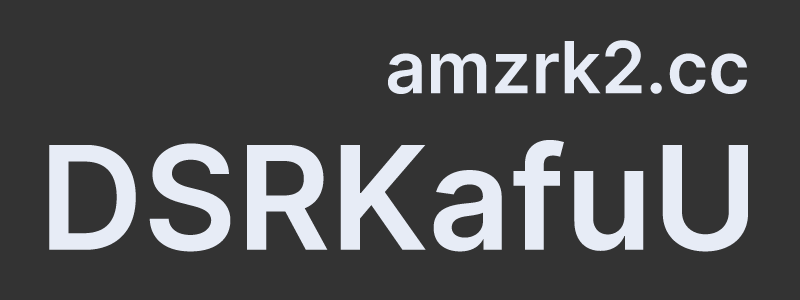
<style>
.page{position:relative;width:800px;height:300px;background:#333333}
.page>*{position:absolute;margin:0}
.t1{font:72px "Inter-SemiBold";color:#e7ecf6}
.t2{font:144px "Inter-SemiBold";color:#e7ecf6}
</style>
<div class="page">
<p class="t1" style="left:388px;top:40px;width:359px;height:54px">amzrk2.cc</p>
<p class="t2" style="left:49px;top:140px;width:699px;height:112px">DSRKafuU</p>
</div>
